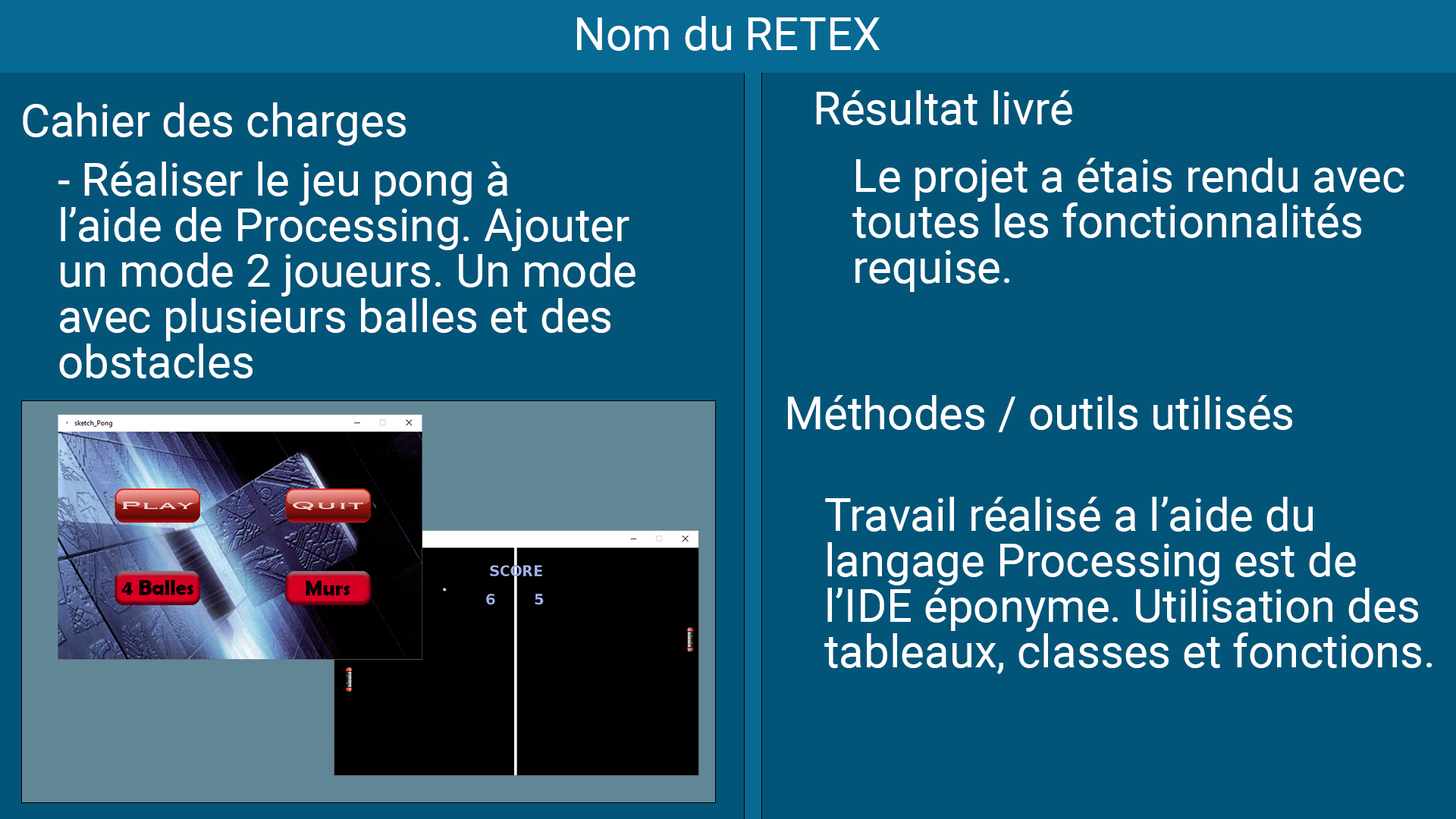
<style>
.page{position:relative;width:1456px;height:819px;background:#025579}
.page>*{position:absolute;margin:0}
.t1{font:45.5px "Roboto-Regular";color:#ffffff}
.t2{font:45.5px/45.5px "Roboto-Regular";color:#ffffff}
</style>
<div class="page">
<p class="t1" style="left:577px;top:16px;width:303px;height:35px">Nom du RETEX</p>
<p class="t1" style="left:816px;top:90px;width:256px;height:35px">Résultat livré</p>
<p class="t1" style="left:23px;top:102px;width:383px;height:44px">Cahier des charges</p>
<p class="t2" style="left:58px;top:162px;width:577px;height:216px">- Réaliser le jeu pong à<br>l’aide de Processing. Ajouter<br>un mode 2 joueurs. Un mode<br>avec plusieurs balles et des <br>obstacles</p>
<p class="t2" style="left:852px;top:158px;width:552px;height:134px">Le projet a étais rendu avec<br>toutes les fonctionnalités<br>requise.</p>
<p class="t1" style="left:788px;top:395px;width:504px;height:37px">Méthodes / outils utilisés</p>
<p class="t2" style="left:824px;top:497px;width:608px;height:177px">Travail réalisé a l’aide du <br>langage Processing est de<br>l’IDE éponyme. Utilisation des <br>tableaux, classes et fonctions.</p>
</div>
